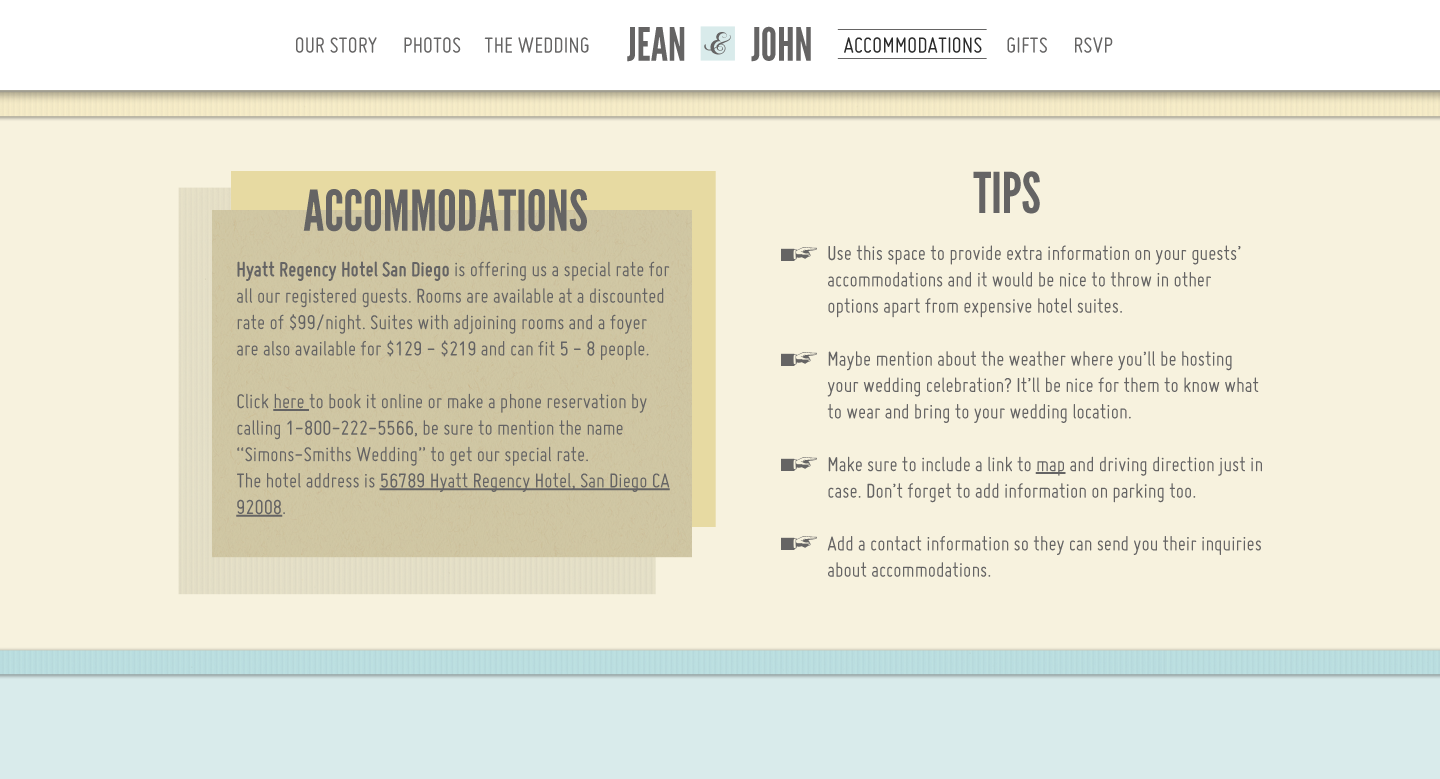
<style>
.page{position:relative;width:1440px;height:779px;background:#f7f2de}
.page>*{position:absolute;margin:0}
.t1{font:46px "LeagueGothic";color:#656464;text-transform:uppercase}
.t2{font:24px "Miso";color:#656464;text-transform:uppercase}
.t3{font:24px "Miso";color:#2b2b2b;text-transform:uppercase}
.t4{font:56px "LeagueGothic";color:#656464;text-transform:uppercase}
.t5{font:22px "Miso";color:#656464}
.t6{font:22px "Miso";color:#656464;text-decoration:underline}
.t7{font:22px "Miso-Bold";color:#656464}
</style>
<div class="page">
<p class="t1" style="left:627px;top:27px;width:58px;height:35px">JEAN</p>
<p class="t1" style="left:751px;top:26px;width:60px;height:36px">JOHN</p>
<p class="t2" style="left:296px;top:37px;width:81px;height:16px">our story</p>
<p class="t2" style="left:404px;top:37px;width:57px;height:16px">photos</p>
<p class="t2" style="left:484px;top:37px;width:105px;height:16px">the wedding</p>
<p class="t3" style="left:844px;top:37px;width:138px;height:16px">accommodations</p>
<p class="t2" style="left:1007px;top:37px;width:40px;height:16px">gifts</p>
<p class="t2" style="left:1075px;top:37px;width:38px;height:16px">rsvp</p>
<p class="t4" style="left:973px;top:171px;width:67px;height:43px">tips</p>
<p class="t4" style="left:303px;top:189px;width:284px;height:43px">accommodations</p>
<p class="t5" style="left:827px;top:245px;width:435px;height:332px">Use this space to provide extra information on your guests’ accommodations and it would be nice to throw in other <br>options apart from expensive hotel suites.<br><br>Maybe mention about the weather where you’ll be hosting your wedding celebration? It’ll be nice for them to know what to wear and bring to your wedding location.<br><br>Make sure to include a link to <span class="t6">map</span> and driving direction just in case. Don’t forget to add information on parking too.<br><br>Add a contact information so they can send you their inquiries about accommodations.</p>
<p class="t5" style="left:236px;top:261px;width:434px;height:256px"><span class="t7">Hyatt Regency Hotel San Diego </span>is offering us a special rate for all our registered guests. Rooms are available at a discounted rate of $99/night. Suites with adjoining rooms and a foyer are also available for $129 - $219 and can fit 5 - 8 people.<br><br>Click <span class="t6">here </span>to book it online or make a phone reservation by calling 1-800-222-5566, be sure to mention the name<br>“Simons-Smiths Wedding” to get our special rate. <br>The hotel address is <span class="t6">56789 Hyatt Regency Hotel, San Diego CA 92008</span>.</p>
</div>
